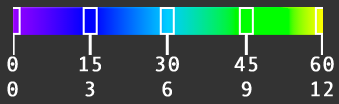
<style>
.page{position:relative;width:339px;height:104px;background:#333333}
.page>*{position:absolute;margin:0}
.t1{font:20.7px "AndaleMono";letter-spacing:0.01em;color:#ffffff;font-weight:bold}
</style>
<div class="page">
<p class="t1" style="left:7px;top:56px;width:11px;height:41px;text-align:center">0<br>0</p>
<p class="t1" style="left:79px;top:56px;width:22px;height:41px;text-align:center">15<br>3</p>
<p class="t1" style="left:155px;top:56px;width:24px;height:41px;text-align:center">30<br>6</p>
<p class="t1" style="left:234px;top:56px;width:24px;height:41px;text-align:center">45<br>9</p>
<p class="t1" style="left:310px;top:56px;width:24px;height:41px;text-align:center">60<br>12</p>
</div>
